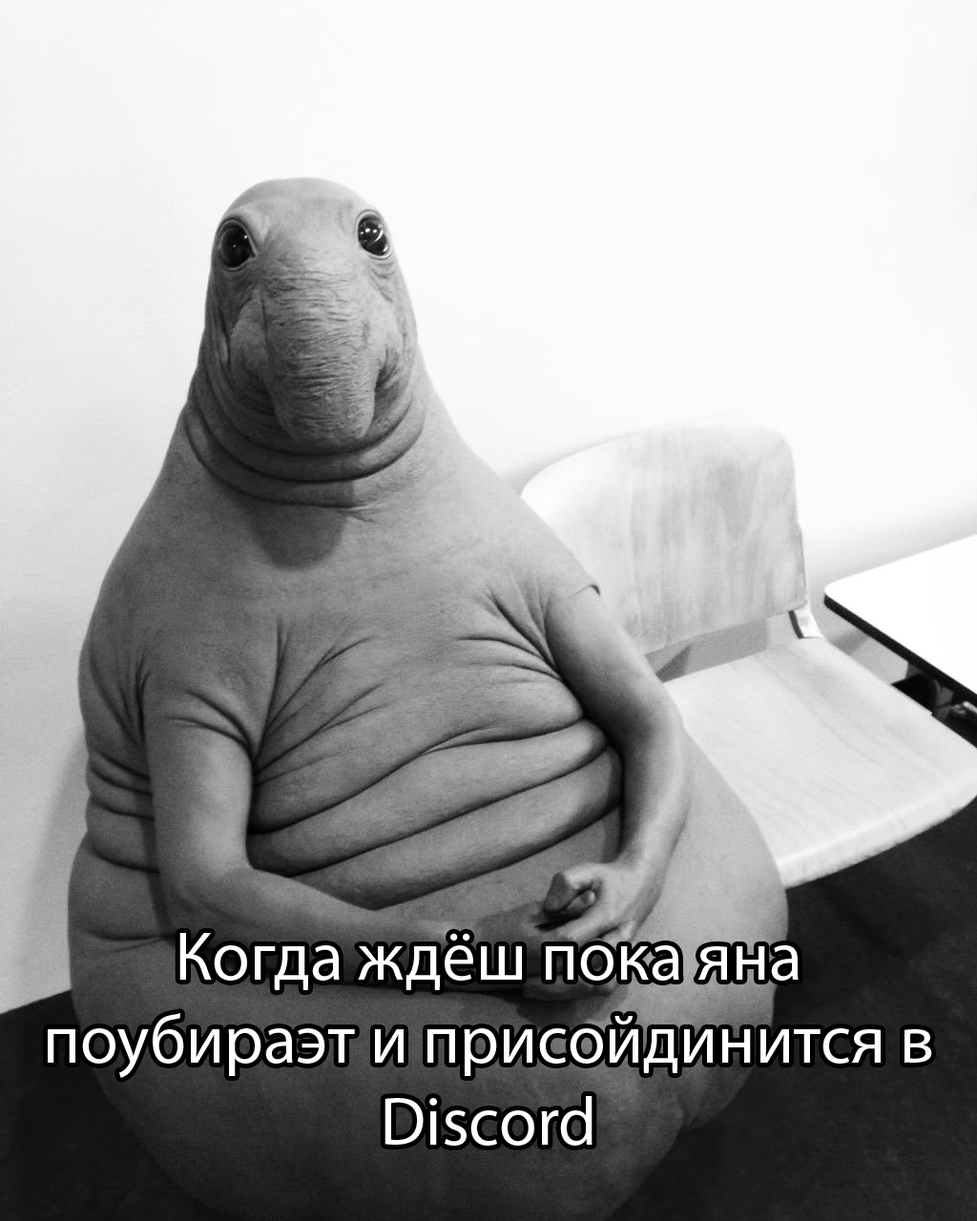
<style>
.page{position:relative;width:977px;height:1221px}
.page>*{position:absolute;margin:0}
.t1{font:68.7px "MyriadPro-Regular";color:#ffffff}
</style>
<div class="page">
<p class="t1" style="left:48px;top:933px;width:884px;height:213px;text-align:center">Когда ждёш пока яна поубираэт и присойдинится в Discord</p>
</div>
